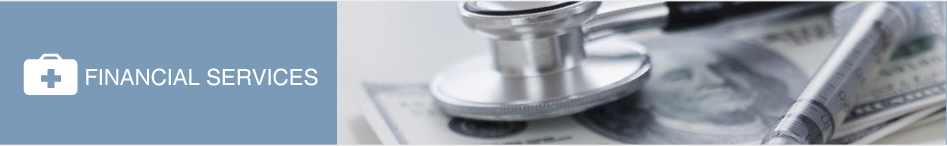
<style>
.page{position:relative;width:947px;height:146px;background:#7b9ab8}
.page>*{position:absolute;margin:0}
.t1{font:22.2px "Helvetica";color:#ffffff;text-transform:uppercase}
.t2{font:22.2px "Helvetica";color:#2784db;text-transform:uppercase}
</style>
<div class="page">
<p class="t1" style="left:86px;top:68px;width:232px;height:18px"><span class="t2">  <br></span>Financial Services</p>
</div>
